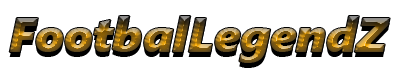
<style>
.page{position:relative;width:400px;height:80px;background:#ffffff}
.page>*{position:absolute;margin:0}
.t1{font:48px "SegoeUIBlack-Italic"}
</style>
<div class="page">
<p class="t1" style="left:9px;top:16px;width:381px;height:47px">FootbalLegendZ</p>
</div>
